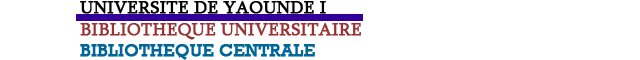
<style>
.page{position:relative;width:640px;height:60px;background:#ffffff}
.page>*{position:absolute;margin:0}
.t1{font:18px "Sylfaen";color:#993333;font-weight:bold}
.t2{font:18px "Sylfaen";color:#000000;font-weight:bold}
.t3{font:18px "Rockwell";color:#006699;font-weight:bold}
</style>
<div class="page">
<p class="t1" style="left:80px;top:1px;width:281px;height:59px"><span class="t2">UNIVERSITE DE YAOUNDE I<br></span>BIBLIOTHEQUE UNIVERSITAIRE<br><span class="t3">BIBLIOTHEQUE CENTRALE</span></p>
</div>
